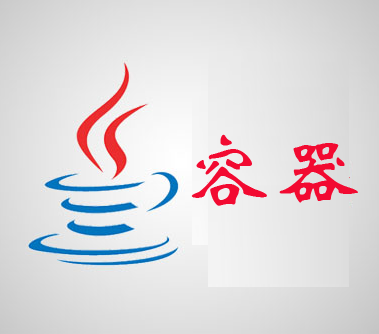
<style>
.page{position:relative;width:379px;height:334px}
.page>*{position:absolute;margin:0}
.t1{font:90px "STXinwei";color:#f20a31}
</style>
<div class="page">
<p class="t1" style="left:191px;top:134px;width:167px;height:72px">容器</p>
</div>
